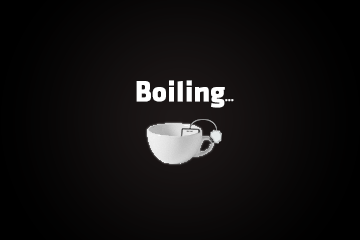
<style>
.page{position:relative;width:360px;height:240px}
.page>*{position:absolute;margin:0}
.t1{font:28.9px "KlavikaBold-Bold";color:#ffffff;font-weight:bold}
.t2{font:9.9px "KlavikaBold-Bold";color:#ffffff;font-weight:bold}
</style>
<div class="page">
<p class="t1" style="left:136px;top:80px;width:98px;height:28px">Boiling<span class="t2">...</span></p>
</div>
